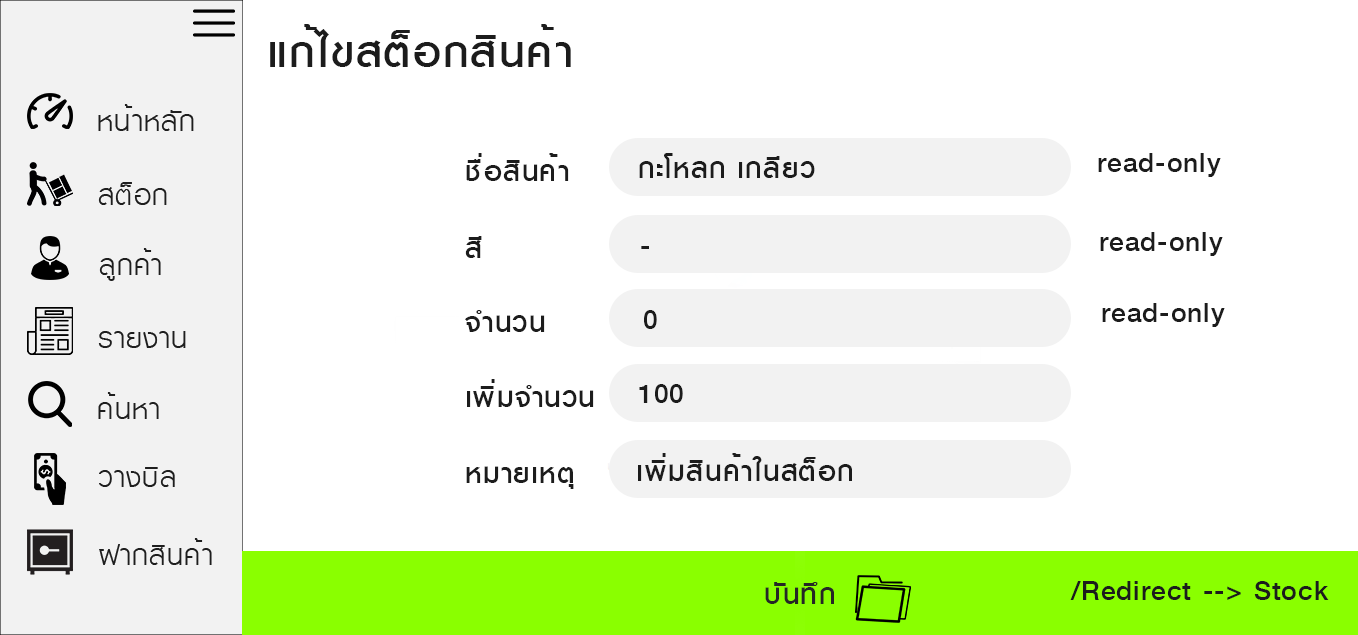
<style>
.page{position:relative;width:1358px;height:635px;background:#ffffff}
.page>*{position:absolute;margin:0}
.t1{font:61.6px "KittithadaMedium65P";letter-spacing:0.025em;color:#1c1c1c}
.t2{font:40px "KittithadaMedium65P";letter-spacing:0.025em;color:#1c1c1c}
.t3{font:40px "KittithadaMedium65P";letter-spacing:0.025em;color:#262626}
</style>
<div class="page">
<p class="t1" style="left:270px;top:24px;width:301px;height:43px">แก้ไขสต็อกสินค้า</p>
<p class="t2" style="left:466px;top:153px;width:103px;height:28px">ชื่อสินค้า</p>
<p class="t2" style="left:639px;top:153px;width:176px;height:25px">กะโหลก เกลียว</p>
<p class="t2" style="left:1098px;top:153px;width:123px;height:24px">read-only</p>
<p class="t2" style="left:1100px;top:232px;width:123px;height:24px">read-only</p>
<p class="t2" style="left:465px;top:236px;width:17px;height:22px">สี</p>
<p class="t2" style="left:641px;top:246px;width:8px;height:3px">-</p>
<p class="t2" style="left:1102px;top:303px;width:123px;height:24px">read-only</p>
<p class="t2" style="left:465px;top:310px;width:80px;height:22px">จำนวน</p>
<p class="t2" style="left:644px;top:310px;width:13px;height:19px">0</p>
<p class="t2" style="left:467px;top:379px;width:127px;height:28px">เพิ่มจำนวน</p>
<p class="t2" style="left:639px;top:384px;width:44px;height:19px">100</p>
<p class="t2" style="left:638px;top:453px;width:214px;height:28px">เพิ่มสินค้าในสต็อก</p>
<p class="t2" style="left:466px;top:466px;width:108px;height:23px">หมายเหตุ</p>
<p class="t3" style="left:765px;top:582px;width:69px;height:22px">บันทึก</p>
<p class="t2" style="left:1070px;top:581px;width:259px;height:19px">/Redirect --&gt; Stock</p>
</div>
